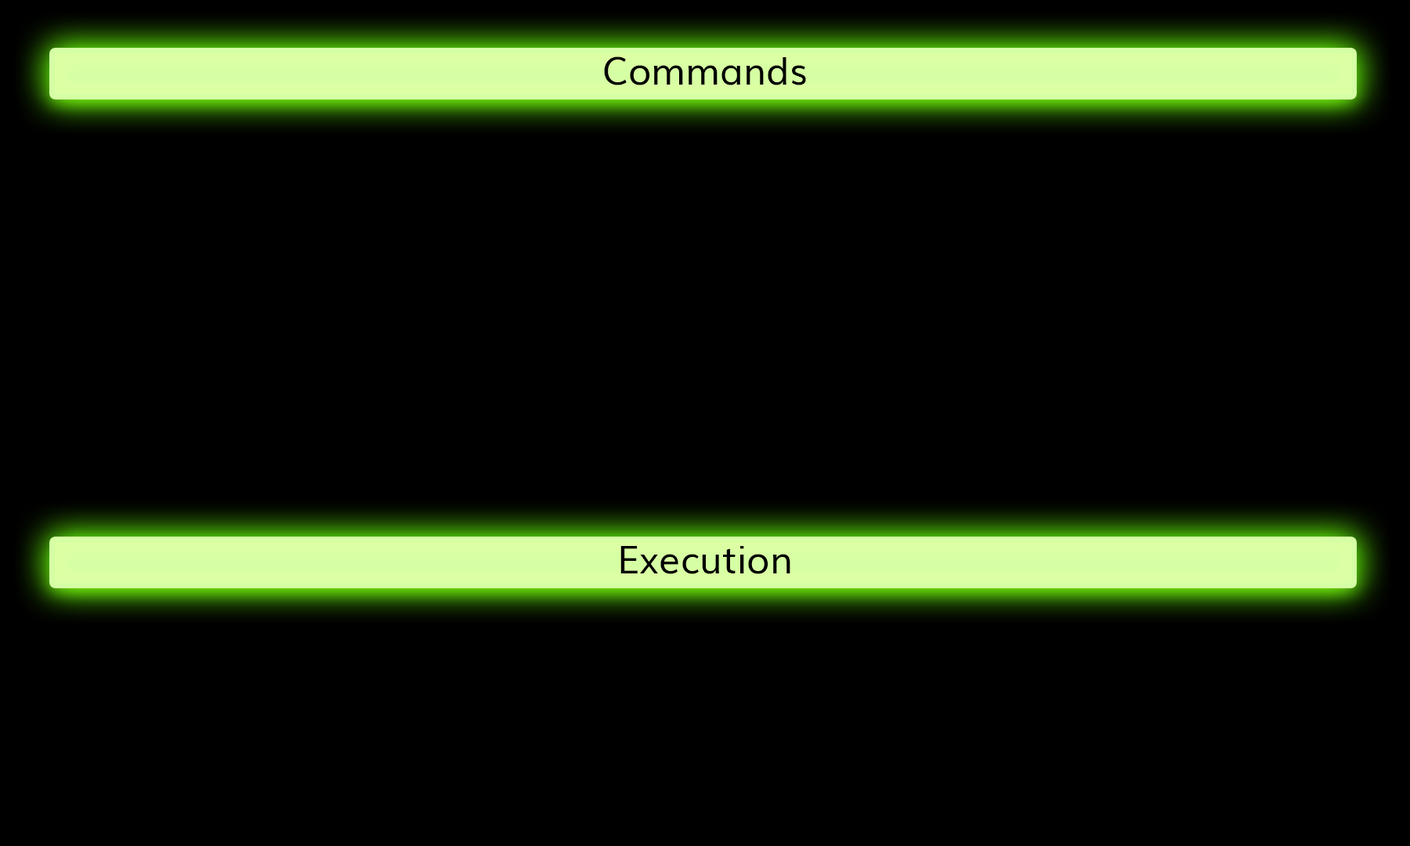
<style>
.page{position:relative;width:1410px;height:846px;background:#000000}
.page>*{position:absolute;margin:0}
.t1{font:37.6px "Muli";color:#000000}
</style>
<div class="page">
<p class="t1" style="left:604px;top:56px;width:202px;height:29px">Commands</p>
<p class="t1" style="left:620px;top:546px;width:170px;height:28px">Execution</p>
</div>
